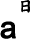
<style>
.page{position:relative;width:30px;height:39px;background:#ffffff}
.page>*{position:absolute;margin:0}
.t1{font:18px "DFKaiShu-SB-Estd-BF";color:#000000;font-weight:bold}
.t2{font:30px "ArialMT";color:#000000;font-weight:bold}
</style>
<div class="page">
<p class="t1" style="left:21px;top:0px;width:10px;height:13px">日</p>
<p class="t2" style="left:0px;top:21px;width:16px;height:18px">a</p>
</div>
